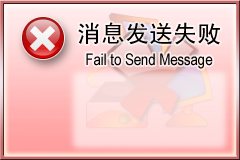
<style>
.page{position:relative;width:240px;height:160px}
.page>*{position:absolute;margin:0}
.t1{font:24px "SimHei";color:#000000}
.t2{font:16px "ArialNarrow";color:#000000}
</style>
<div class="page">
<p class="t1" style="left:78px;top:22px;width:142px;height:23px">消息发送失败</p>
<p class="t2" style="left:86px;top:53px;width:127px;height:16px">Fail to Send Message</p>
</div>
